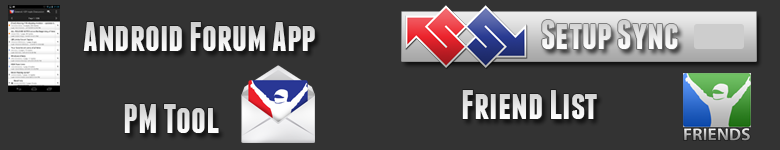
<style>
.page{position:relative;width:780px;height:150px;background:#333333}
.page>*{position:absolute;margin:0}
.t1{font:41.4px "Franchise-Bold";color:#e8e8e8}
.t2{font:41.4px "Franchise-Bold";color:#e6e6e6}
</style>
<div class="page">
<p class="t1" style="left:83px;top:22px;width:232px;height:29px">Android Forum App</p>
<p class="t1" style="left:542px;top:20px;width:136px;height:29px">Setup Sync</p>
<p class="t1" style="left:462px;top:90px;width:135px;height:29px">Friend List</p>
<p class="t2" style="left:124px;top:104px;width:95px;height:29px">PM Tool</p>
</div>
